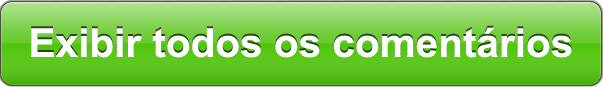
<style>
.page{position:relative;width:603px;height:87px}
.page>*{position:absolute;margin:0}
.t1{font:39.7px "Arial-BoldMT";color:#ffffff}
</style>
<div class="page">
<p class="t1" style="left:31px;top:27px;width:541px;height:31px">Exibir todos os comentários</p>
</div>
